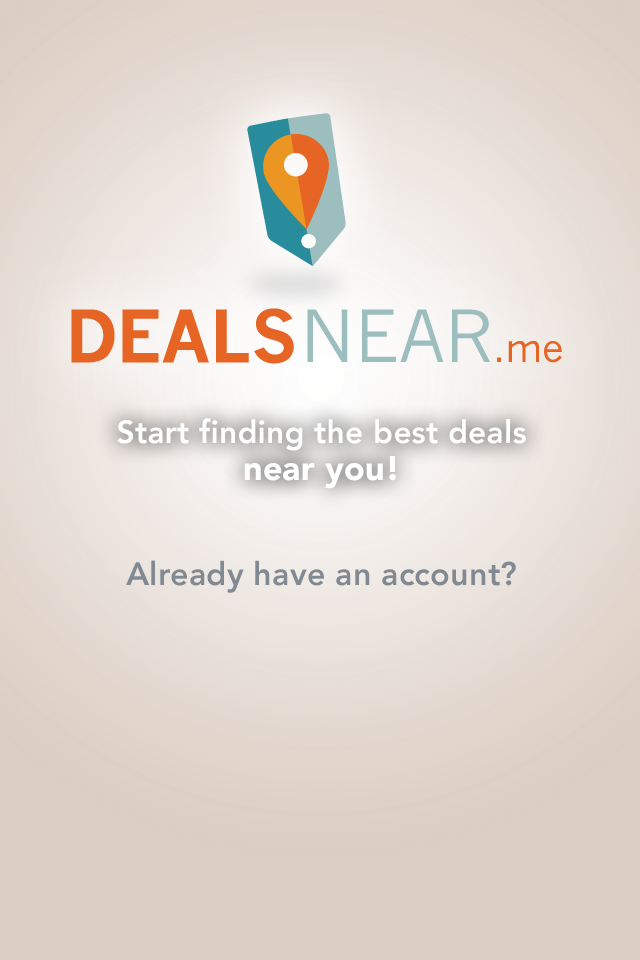
<style>
.page{position:relative;width:640px;height:960px}
.page>*{position:absolute;margin:0}
.t1{font:31.8px "Avenir-Heavy";letter-spacing:0.005em;color:#ffffff}
.t2{font:34px/37.5px "Avenir-Black";letter-spacing:0.005em;color:#ffffff}
.t3{font:32.3px "Avenir-Heavy";letter-spacing:0.005em;color:#818a93}
</style>
<div class="page">
<p class="t1" style="left:117px;top:418px;width:409px;height:71px;text-align:center">Start finding the best deals<br><span class="t2">near you!</span></p>
<p class="t3" style="left:126px;top:560px;width:390px;height:33px">Already have an account?</p>
</div>
